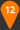
<style>
.page{position:relative;width:20px;height:30px;background:#ff7800}
.page>*{position:absolute;margin:0}
.t1{font:9px "OpenSans";color:#ffffff;font-weight:bold}
</style>
<div class="page">
<p class="t1" style="left:5px;top:6px;width:10px;height:8px">12</p>
</div>
